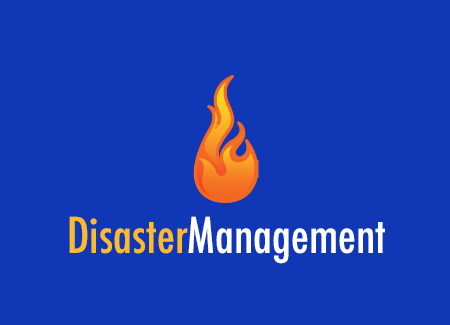
<style>
.page{position:relative;width:450px;height:325px;background:#1037b5}
.page>*{position:absolute;margin:0}
.t1{font:48px "Futura-CondensedMedium";color:#ffffff}
.t2{font:48px "Futura-CondensedMedium";color:#fdbb26}
</style>
<div class="page">
<p class="t1" style="left:69px;top:216px;width:316px;height:48px"><span class="t2">Disaster</span>Management</p>
</div>
